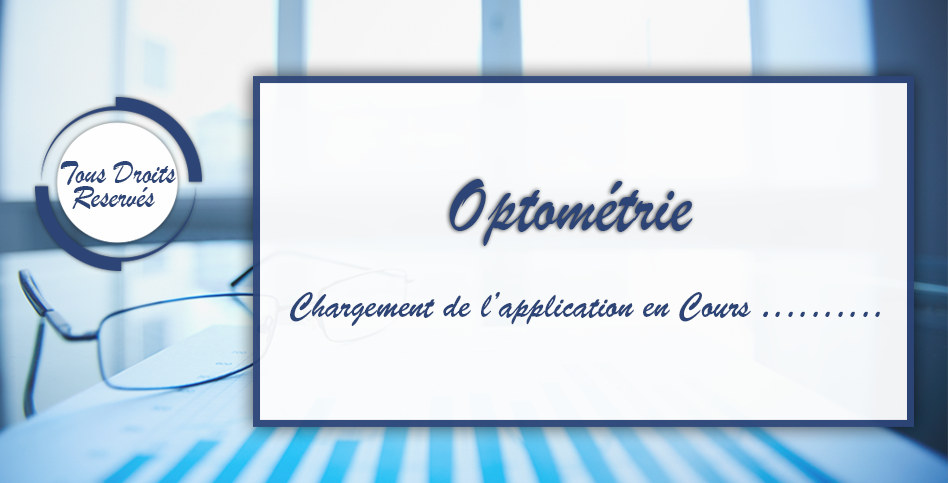
<style>
.page{position:relative;width:948px;height:483px}
.page>*{position:absolute;margin:0}
.t1{font:34.2px/24px "BrushScriptMT";color:#2c4476;scale:0.88 1}
.t2{font:80.9px "BrushScriptMT";color:#2c4476;scale:0.88 1}
.t3{font:35.3px "BrushScriptStd";color:#2c4476;scale:0.88 1}
</style>
<div class="page">
<p class="t1" style="left:60px;top:161px;width:116px;height:48px;text-align:center">Tous Droits <br>Reservés</p>
<p class="t2" style="left:449px;top:179px;width:244px;height:67px">Optométrie</p>
<p class="t3" style="left:290px;top:292px;width:461px;height:34px">Chargement de l’application en Cours</p>
<p class="t3" style="left:763px;top:311px;width:5px;height:6px">.</p>
<p class="t3" style="left:763px;top:311px;width:5px;height:6px">.</p>
<p class="t3" style="left:775px;top:311px;width:5px;height:6px">.</p>
<p class="t3" style="left:788px;top:311px;width:5px;height:6px">.</p>
<p class="t3" style="left:800px;top:311px;width:5px;height:6px">.</p>
<p class="t3" style="left:813px;top:311px;width:5px;height:6px">.</p>
<p class="t3" style="left:825px;top:311px;width:5px;height:6px">.</p>
<p class="t3" style="left:838px;top:311px;width:5px;height:6px">.</p>
<p class="t3" style="left:850px;top:311px;width:5px;height:6px">.</p>
<p class="t3" style="left:863px;top:311px;width:5px;height:6px">.</p>
<p class="t3" style="left:875px;top:311px;width:5px;height:6px">.</p>
</div>
